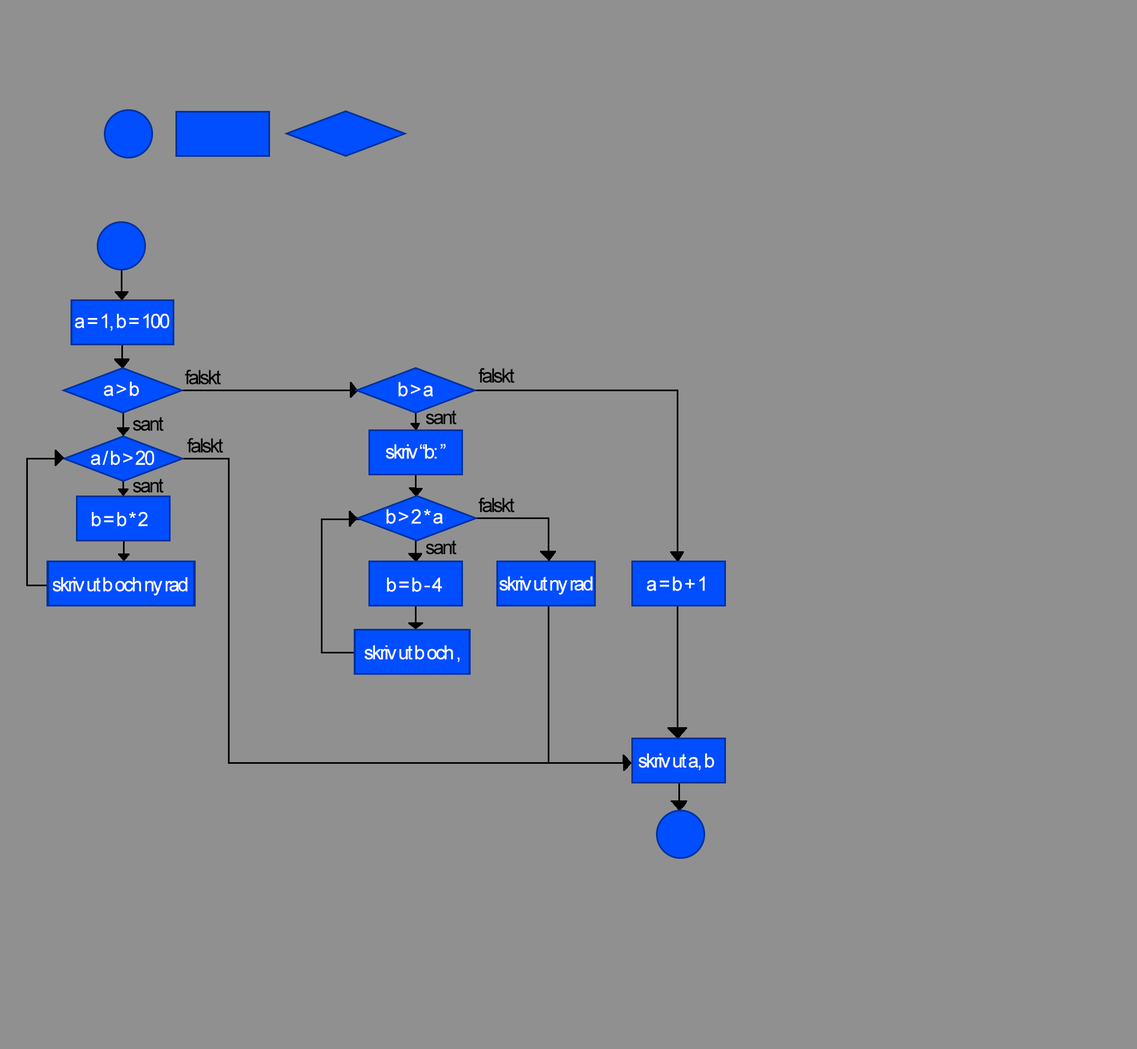
<style>
.page{position:relative;width:1137px;height:1049px;background:#909090}
.page>*{position:absolute;margin:0}
.t1{font:19.7px "ArialMT";letter-spacing:-0.1em;color:#ffffff}
.t2{font:19.9px "ArialMT";letter-spacing:-0.1em;color:#000000}
.t3{font:19.9px "ArialMT";letter-spacing:-0.1em;color:#ffffff}
</style>
<div class="page">
<p class="t1" style="left:75px;top:314px;width:94px;height:17px">a = 1, b = 100</p>
<p class="t2" style="left:185px;top:369px;width:36px;height:16px">falskt</p>
<p class="t2" style="left:478px;top:368px;width:36px;height:15px">falskt</p>
<p class="t1" style="left:104px;top:381px;width:35px;height:15px">a &gt; b</p>
<p class="t3" style="left:398px;top:382px;width:35px;height:15px">b &gt; a</p>
<p class="t2" style="left:426px;top:410px;width:30px;height:15px">sant</p>
<p class="t2" style="left:133px;top:416px;width:30px;height:15px">sant</p>
<p class="t2" style="left:187px;top:438px;width:36px;height:15px">falskt</p>
<p class="t3" style="left:386px;top:444px;width:59px;height:15px">skriv “b: ”</p>
<p class="t1" style="left:91px;top:450px;width:63px;height:16px">a / b &gt; 20</p>
<p class="t2" style="left:133px;top:478px;width:30px;height:15px">sant</p>
<p class="t2" style="left:478px;top:497px;width:36px;height:16px">falskt</p>
<p class="t3" style="left:386px;top:509px;width:57px;height:15px">b &gt; 2 * a</p>
<p class="t1" style="left:92px;top:512px;width:56px;height:15px">b = b * 2</p>
<p class="t2" style="left:426px;top:540px;width:30px;height:15px">sant</p>
<p class="t1" style="left:52px;top:577px;width:135px;height:19px">skriv ut b och ny rad</p>
<p class="t1" style="left:387px;top:578px;width:55px;height:14px">b = b - 4</p>
<p class="t1" style="left:499px;top:576px;width:93px;height:19px">skriv ut ny rad</p>
<p class="t3" style="left:646px;top:576px;width:58px;height:15px">a = b + 1</p>
<p class="t1" style="left:364px;top:645px;width:96px;height:17px">skriv ut b och ,</p>
<p class="t1" style="left:638px;top:754px;width:76px;height:16px">skriv ut a, b</p>
</div>
